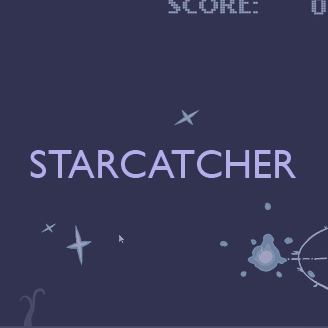
<style>
.page{position:relative;width:328px;height:328px;background:#323251}
.page>*{position:absolute;margin:0}
.t1{font:40px "GillSansMT";color:#b5ade8;text-transform:uppercase}
</style>
<div class="page">
<p class="t1" style="left:30px;top:150px;width:266px;height:28px">StarCatcher</p>
<p class="t1" style="left:30px;top:150px;width:266px;height:28px">StarCatcher</p>
</div>
